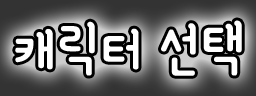
<style>
.page{position:relative;width:256px;height:96px}
.page>*{position:absolute;margin:0}
.t1{font:69.3px "YanoljaYacheR";color:#ffffff}
</style>
<div class="page">
<p class="t1" style="left:15px;top:20px;width:227px;height:56px">캐릭터 선택</p>
</div>
